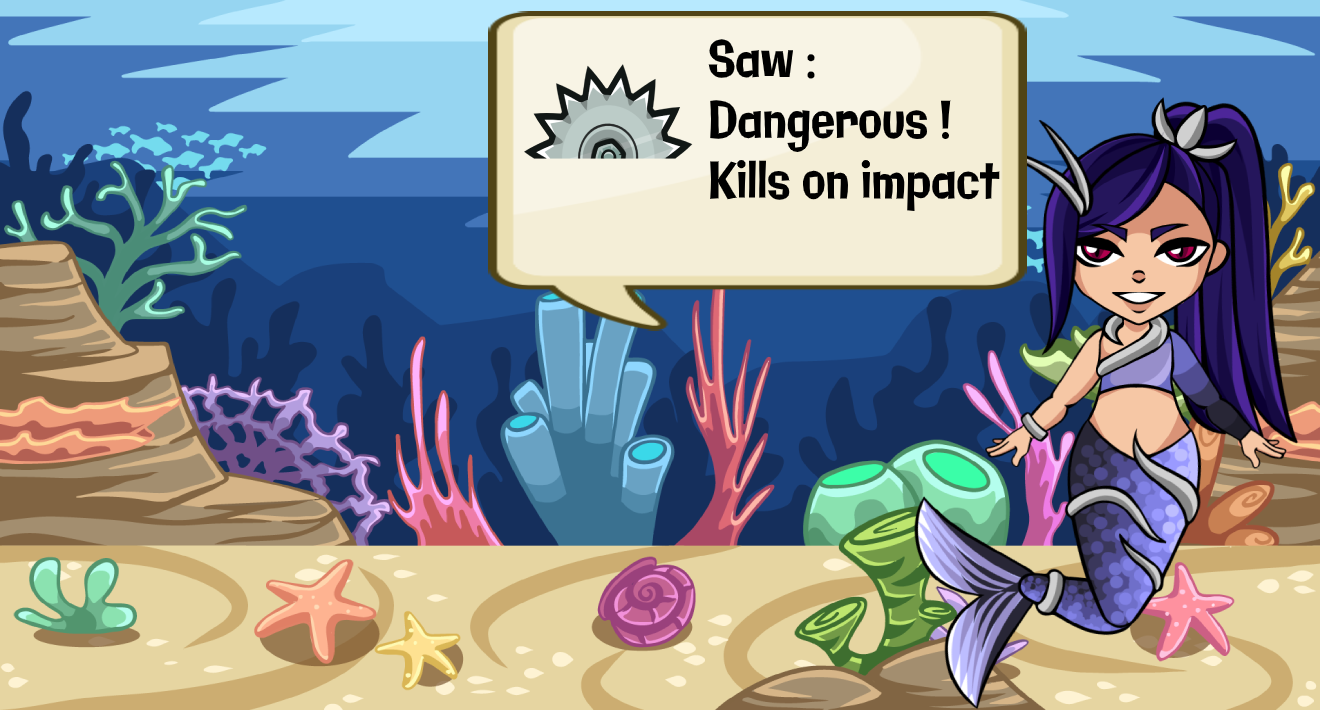
<style>
.page{position:relative;width:1320px;height:710px}
.page>*{position:absolute;margin:0}
.t1{font:50.5px "Galindo-Regular";color:#000000;scale:0.77 1}
</style>
<div class="page">
<p class="t1" style="left:708px;top:39px;width:292px;height:172px">Saw : <br>Dangerous !<br>Kills on impact</p>
</div>
